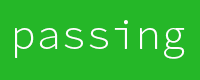
<style>
.page{position:relative;width:200px;height:80px;background:#25b728}
.page>*{position:absolute;margin:0}
.t1{font:41.7px "SourceCodePro-Light";color:#ffffff}
</style>
<div class="page">
<p class="t1" style="left:15px;top:20px;width:170px;height:39px">passing</p>
</div>
